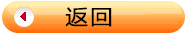
<style>
.page{position:relative;width:186px;height:35px}
.page>*{position:absolute;margin:0}
.t1{font:20.4px "MicrosoftYaHei";letter-spacing:0.1em;color:#000000;scale:1.1 1}
</style>
<div class="page">
<p class="t1" style="left:65px;top:7px;width:47px;height:20px">返回</p>
</div>
